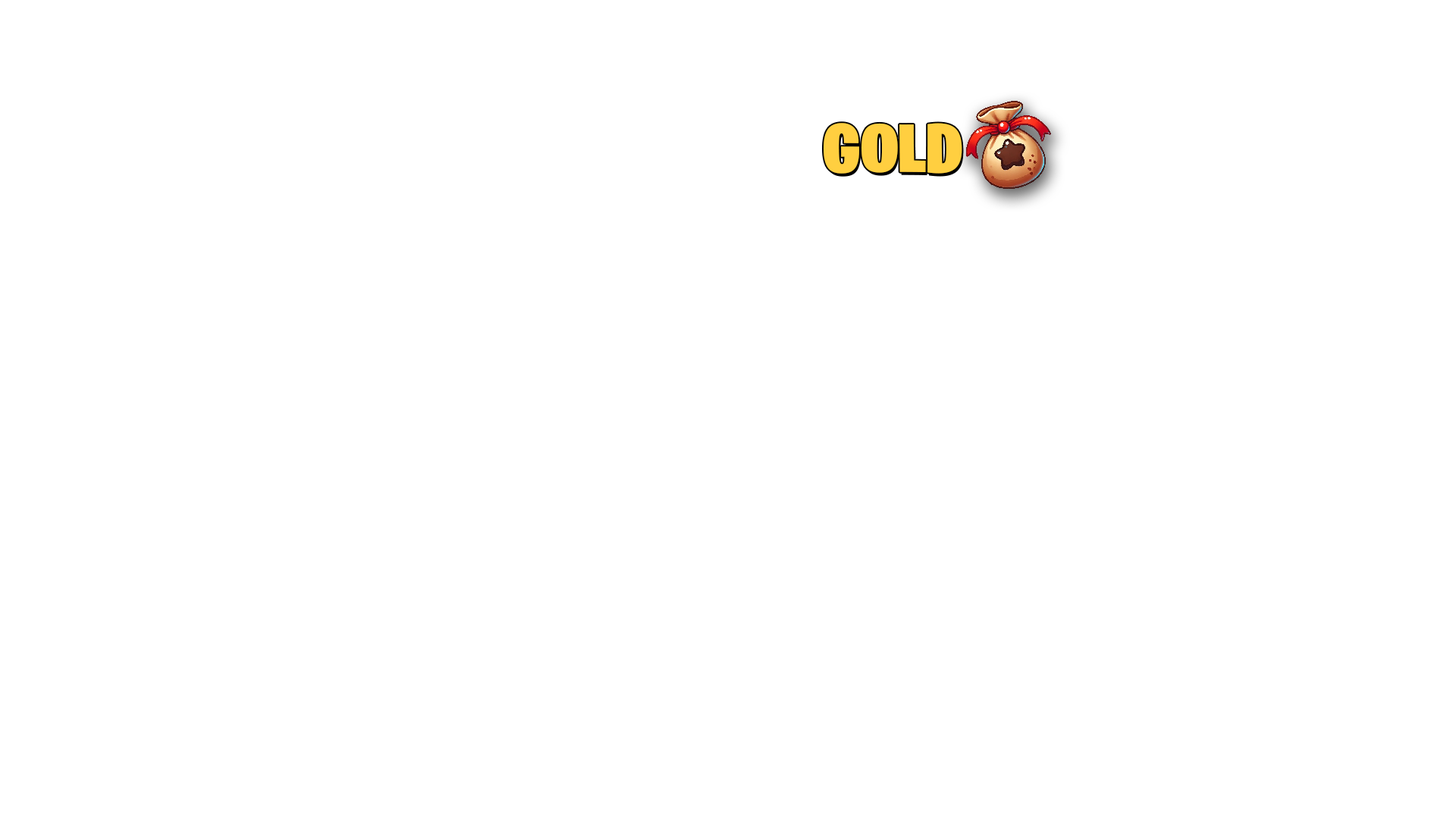
<style>
.page{position:relative;width:1456px;height:819px;background:#ffffff}
.page>*{position:absolute;margin:0}
.t1{font:69.2px "BurbankBigCondensed-Black";color:#ffcf40;scale:1.14 1}
</style>
<div class="page">
<p class="t1" style="left:824px;top:123px;width:138px;height:51px">GOLD</p>
</div>
